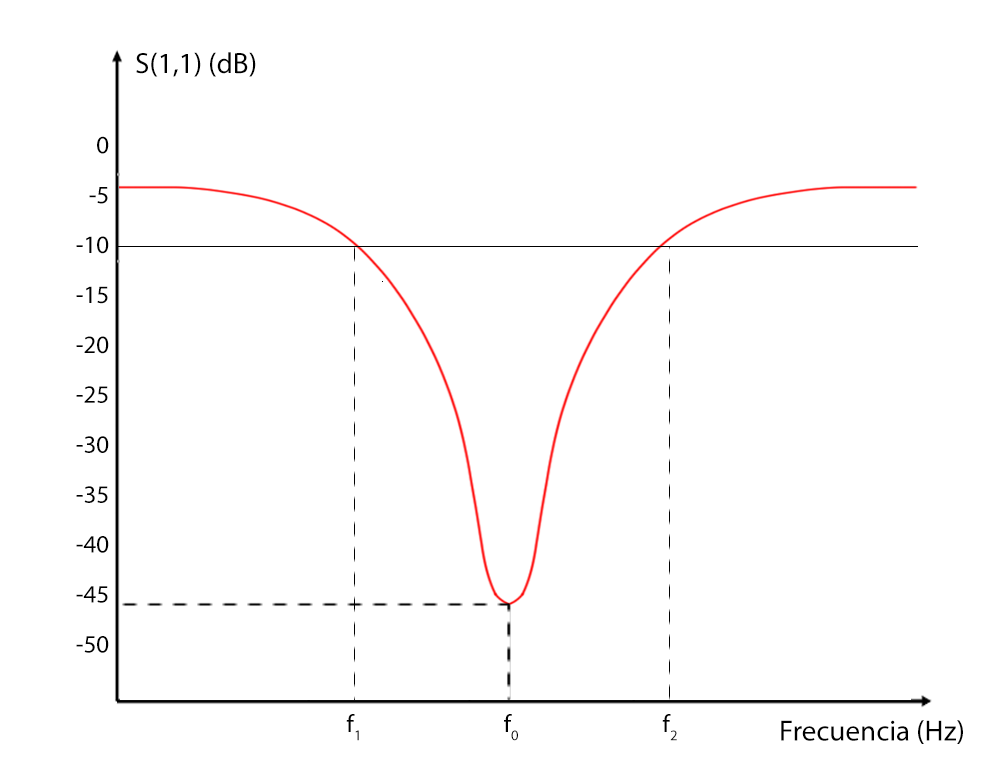
<style>
.page{position:relative;width:1000px;height:783px;background:#ffffff}
.page>*{position:absolute;margin:0}
.t1{font:50px "MyriadPro-Regular";color:#000000}
.t2{font:25px/49.9px "MyriadPro-Regular";color:#000000}
.t3{font:25px "MyriadPro-Regular";color:#000000}
</style>
<div class="page">
<p class="t1" style="left:136px;top:52px;width:120px;height:25px">S(1,1) (dB)</p>
<p class="t2" style="left:76px;top:136px;width:33px;height:517px;text-align:right">0<br>-5<br>-10<br>-15<br>-20<br>-25<br>-30<br>-35<br>-40<br>-45<br>-50</p>
<p class="t3" style="left:346px;top:714px;width:13px;height:27px">f1</p>
<p class="t3" style="left:504px;top:714px;width:14px;height:27px">f0</p>
<p class="t3" style="left:662px;top:714px;width:15px;height:27px">f2</p>
<p class="t1" style="left:781px;top:720px;width:182px;height:24px">Frecuencia (Hz)</p>
</div>
